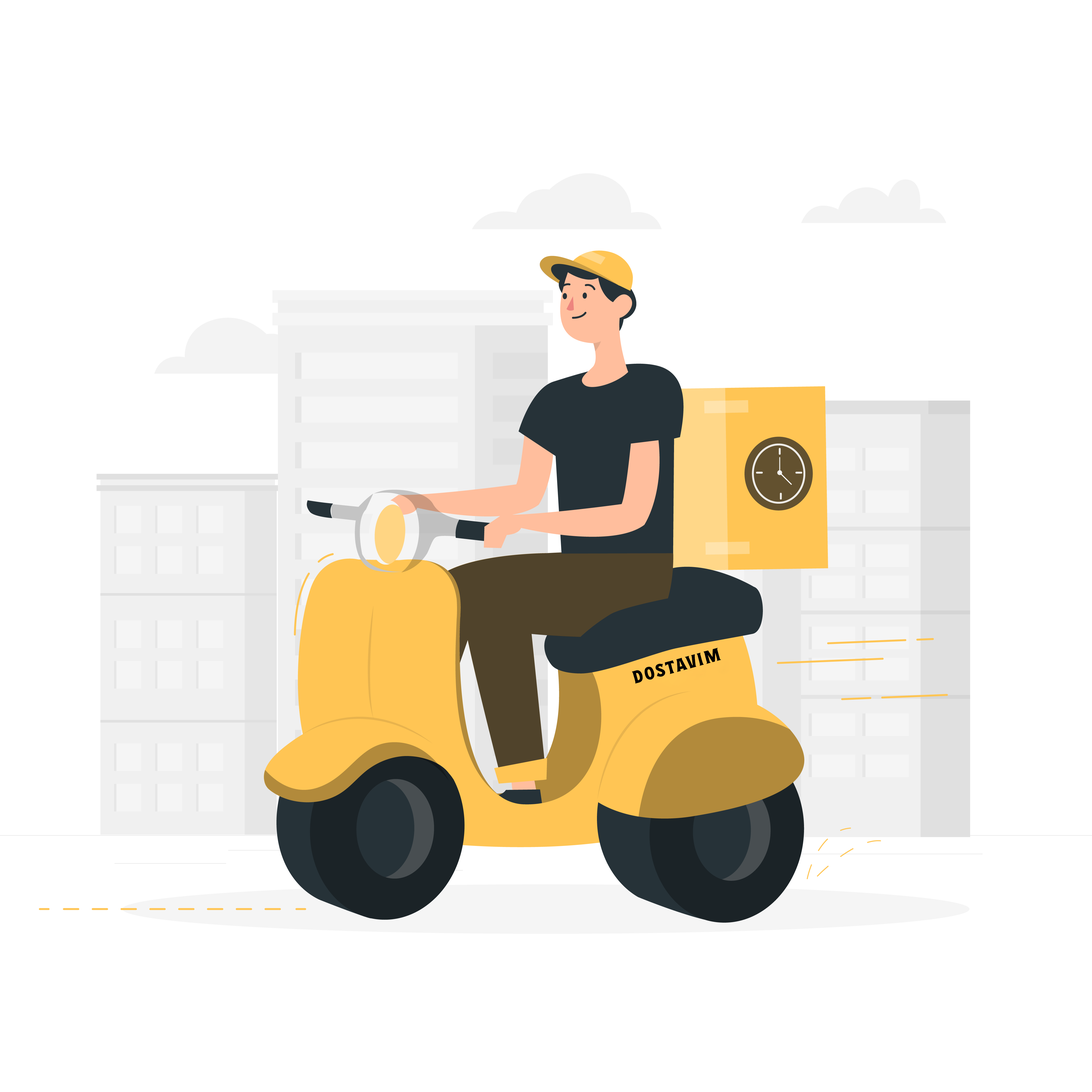
<style>
.page{position:relative;width:1092px;height:1092px;background:#ffffff}
.page>*{position:absolute;margin:0}
.t1{font:15.3px "Espiritu-Regular";letter-spacing:0.1em;color:#000000}
</style>
<div class="page">
<p class="t1" style="left:632px;top:648px;width:89px;height:36px;rotate:-15deg">DOSTAVIM</p>
</div>
